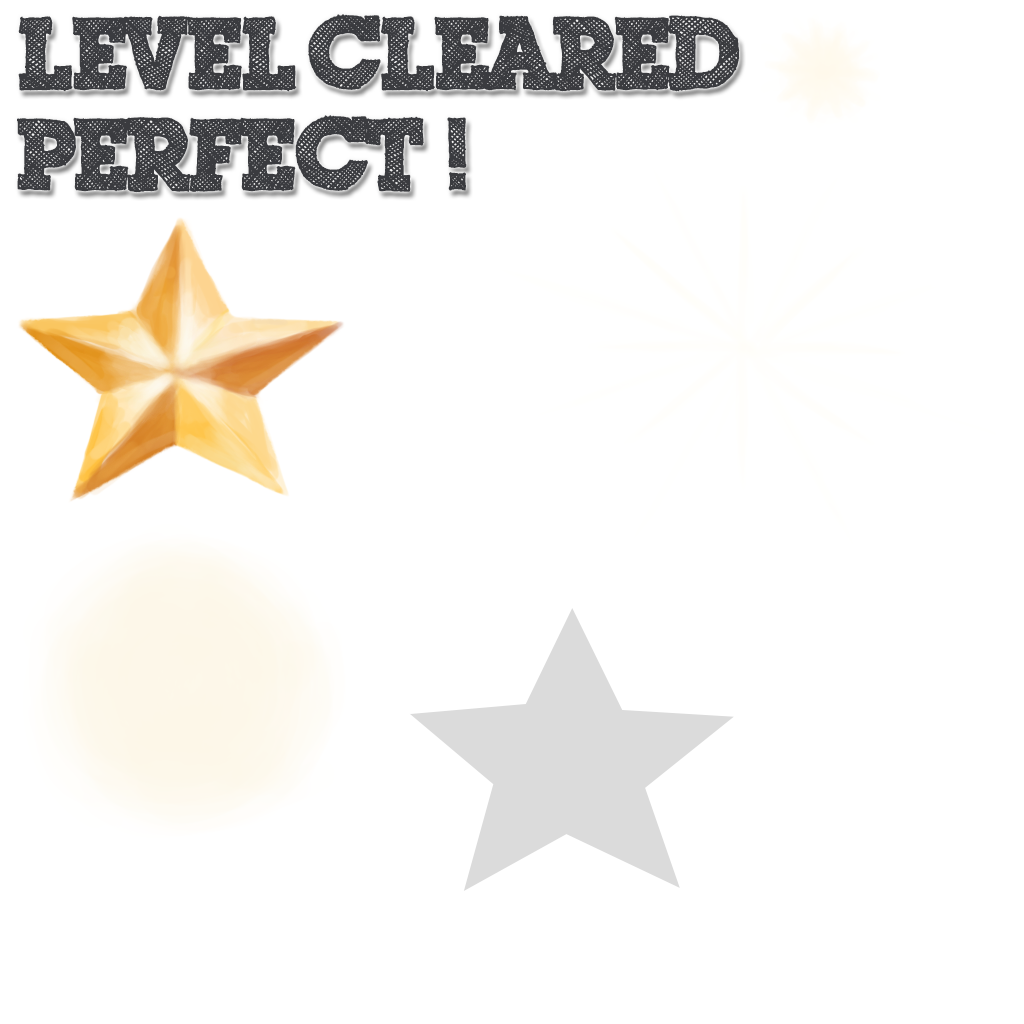
<style>
.page{position:relative;width:1024px;height:1024px;background:#ffffff}
.page>*{position:absolute;margin:0}
.t1{font:99.6px "ScribbleBoxDEMO";letter-spacing:-0.04em;color:#3a3b3f}
</style>
<div class="page">
<p class="t1" style="left:18px;top:14px;width:722px;height:78px">LEVEL CLEARED</p>
<p class="t1" style="left:17px;top:115px;width:450px;height:78px">PERFECT!</p>
</div>
